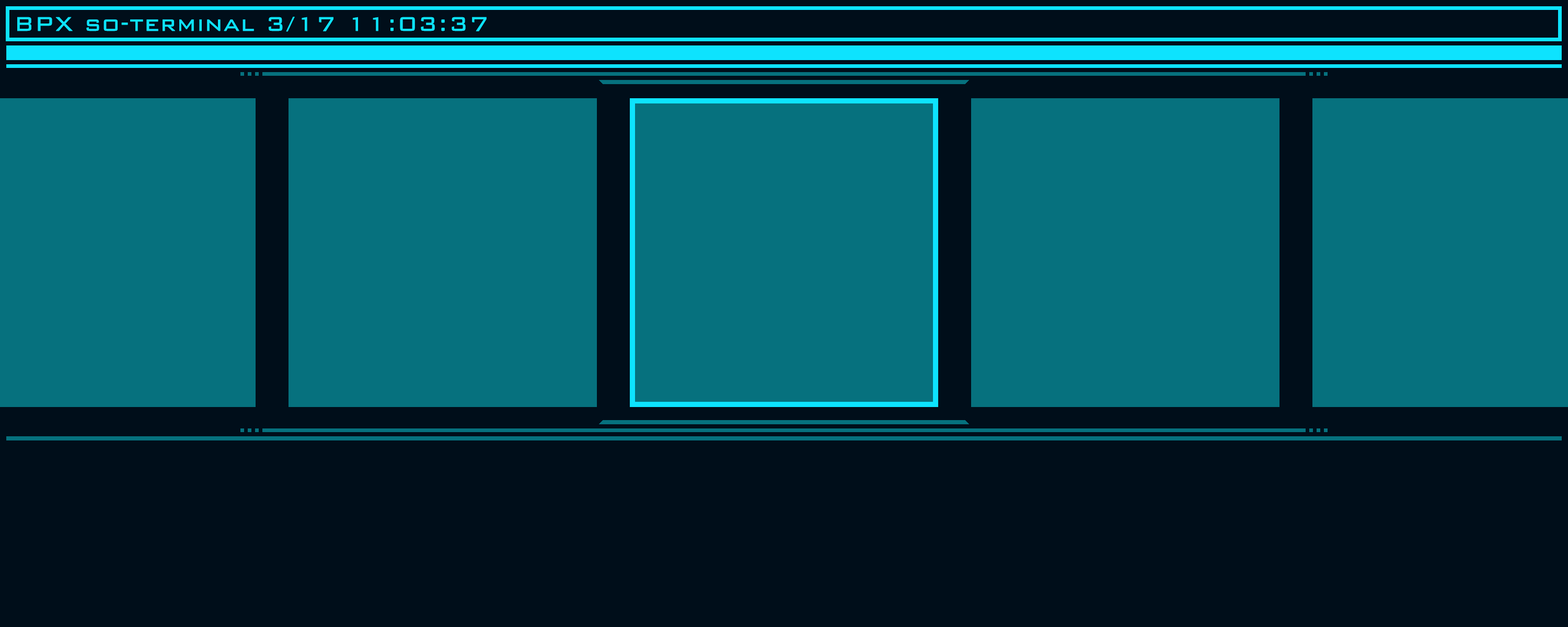
<style>
.page{position:relative;width:1568px;height:627px;background:#000e1a}
.page>*{position:absolute;margin:0}
.t1{font:26.1px "BankGothicBT-Light";color:#0de3fe;font-weight:bold}
</style>
<div class="page">
<p class="t1" style="left:17px;top:17px;width:470px;height:15px">BPX so-terminal 3/17 11:03:37</p>
</div>
